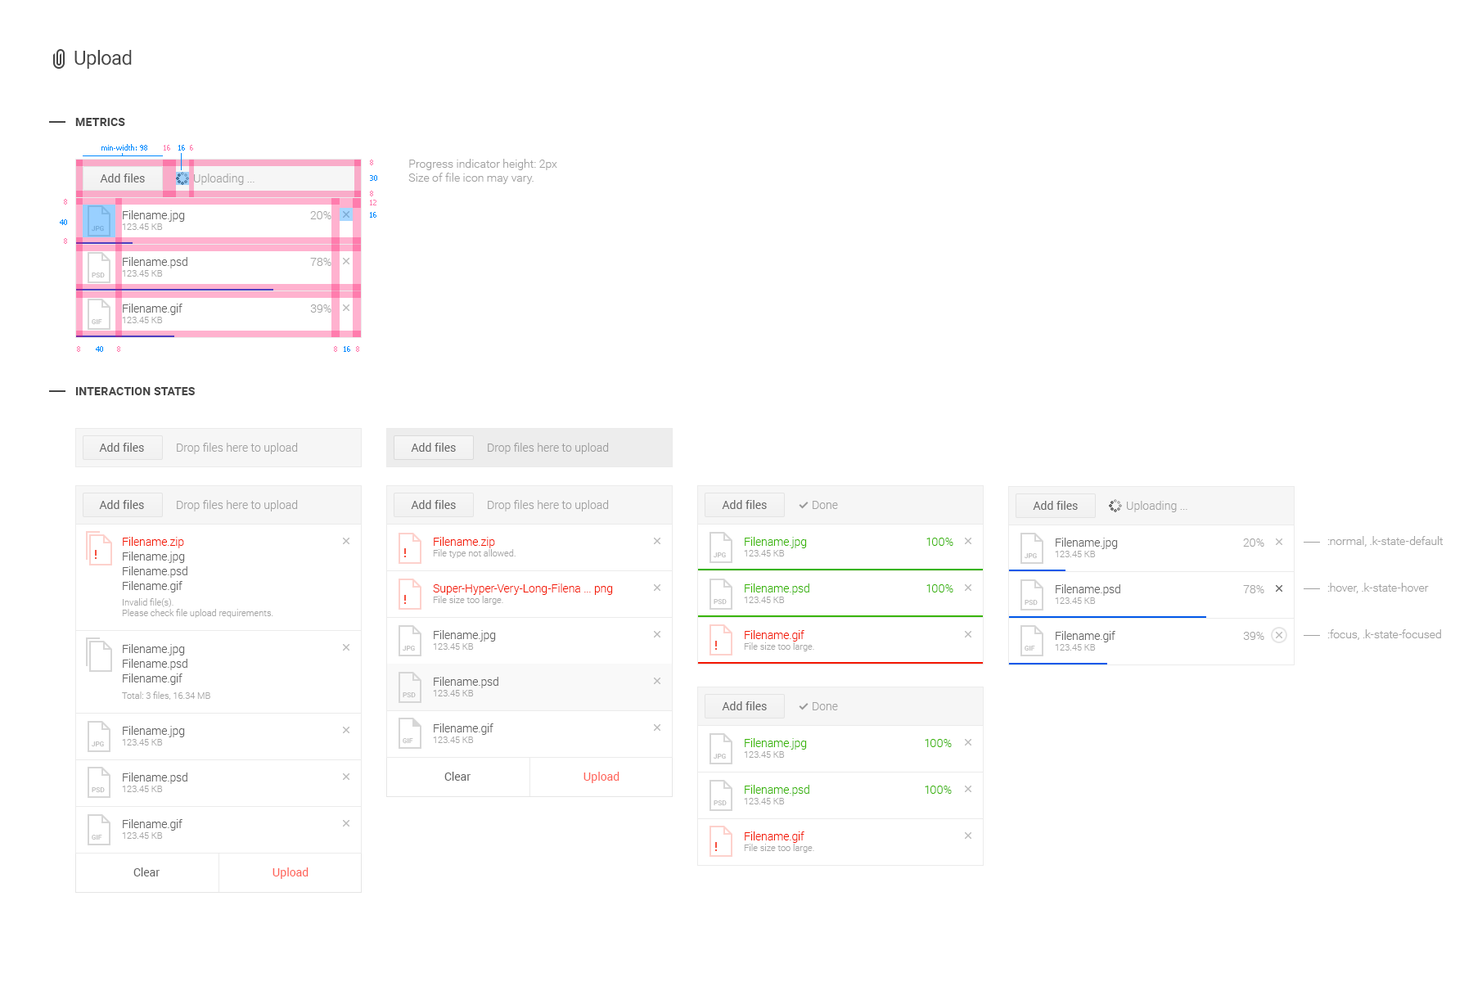
<style>
.page{position:relative;width:1473px;height:982px;background:#ffffff}
.page>*{position:absolute;margin:0}
.t1{font:19.6px "Roboto-Regular";letter-spacing:-0.025em;color:#454545}
.t2{font:11.5px "Roboto-Bold";letter-spacing:0.01em;color:#454545;text-transform:uppercase}
.t3{font:7.4px "Tahoma";color:#008aff}
.t4{font:7.4px "Tahoma";color:#ff7cae}
.t5{font:11.5px "Roboto-Light";color:#a1a1a1}
.t6{font:11.5px "Roboto-Regular";color:#656565}
.t7{font:11.5px/46.6px "Roboto-Light";color:#656565}
.t8{font:11.5px/46.6px "Roboto-Light";color:#a5a5a5}
.t9{font:6.5px "Roboto-Regular";text-transform:uppercase}
.t10{font:6.5px "Roboto-Regular";color:#bababa;text-transform:uppercase}
.t11{font:11.5px "Roboto-Light";color:#9d9d9d}
.t12{font:11.5px/14.7px "Roboto-Light";color:#656565}
.t13{font:11.5px/14.7px "Roboto-Light";color:#f31700}
.t14{font:11.5px/46.6px "Roboto-Light";color:#f31700}
.t15{font:11.5px/46.6px "Roboto-Light";color:#37b400}
.t16{font:11.5px/46.6px "Roboto-Light";color:#a1a1a1}
.t17{font:9px/46.6px "Roboto-Light";color:#a5a5a5}
.t18{font:9px "Roboto-Light";color:#a5a5a5}
.t19{font:11.5px "Roboto-Regular";color:#ff6358}
</style>
<div class="page">
<p class="t1" style="left:74px;top:50px;width:58px;height:19px">Upload</p>
<p class="t2" style="left:75px;top:118px;width:50px;height:8px">Metrics</p>
<p class="t3" style="left:101px;top:144px;width:46px;height:7px">min-width: 98</p>
<p class="t4" style="left:164px;top:145px;width:6px;height:6px">16</p>
<p class="t3" style="left:178px;top:145px;width:7px;height:6px">16</p>
<p class="t4" style="left:190px;top:145px;width:3px;height:6px">6</p>
<p class="t4" style="left:370px;top:160px;width:3px;height:5px">8</p>
<p class="t5" style="left:408px;top:159px;width:149px;height:25px">Progress indicator height: 2px<br>Size of file icon may vary.</p>
<p class="t6" style="left:100px;top:173px;width:45px;height:9px">Add files</p>
<p class="t5" style="left:194px;top:173px;width:60px;height:12px">Uploading ...</p>
<p class="t3" style="left:370px;top:175px;width:7px;height:6px">30</p>
<p class="t4" style="left:370px;top:191px;width:3px;height:5px">8</p>
<p class="t4" style="left:64px;top:199px;width:3px;height:6px">8</p>
<p class="t4" style="left:370px;top:200px;width:6px;height:5px">12</p>
<p class="t3" style="left:60px;top:219px;width:7px;height:6px">40</p>
<p class="t7" style="left:123px;top:210px;width:64px;height:105px">Filename.jpg<br>Filename.psd<br>Filename.gif</p>
<p class="t8" style="left:310px;top:211px;width:21px;height:102px;text-align:right">20%<br>78%<br>39%</p>
<p class="t3" style="left:370px;top:212px;width:6px;height:6px">16</p>
<p class="t9" style="left:92px;top:226px;width:12px;height:6px">JPG</p>
<p class="t4" style="left:64px;top:238px;width:3px;height:6px">8</p>
<p class="t10" style="left:92px;top:272px;width:13px;height:6px">PSD</p>
<p class="t10" style="left:92px;top:319px;width:10px;height:6px">GIF</p>
<p class="t4" style="left:77px;top:346px;width:3px;height:6px">8</p>
<p class="t3" style="left:96px;top:346px;width:7px;height:6px">40</p>
<p class="t4" style="left:117px;top:346px;width:3px;height:6px">8</p>
<p class="t4" style="left:334px;top:346px;width:3px;height:6px">8</p>
<p class="t3" style="left:344px;top:346px;width:6px;height:6px">16</p>
<p class="t4" style="left:356px;top:346px;width:3px;height:6px">8</p>
<p class="t2" style="left:75px;top:387px;width:120px;height:8px">Interaction states</p>
<p class="t6" style="left:99px;top:443px;width:45px;height:9px">Add files</p>
<p class="t5" style="left:177px;top:443px;width:121px;height:11px">Drop files here to upload</p>
<p class="t6" style="left:411px;top:443px;width:45px;height:9px">Add files</p>
<p class="t11" style="left:488px;top:443px;width:121px;height:11px">Drop files here to upload</p>
<p class="t6" style="left:99px;top:500px;width:45px;height:9px">Add files</p>
<p class="t5" style="left:177px;top:500px;width:121px;height:11px">Drop files here to upload</p>
<p class="t6" style="left:411px;top:500px;width:45px;height:9px">Add files</p>
<p class="t5" style="left:488px;top:500px;width:121px;height:11px">Drop files here to upload</p>
<p class="t6" style="left:722px;top:500px;width:45px;height:9px">Add files</p>
<p class="t5" style="left:812px;top:501px;width:26px;height:8px">Done</p>
<p class="t6" style="left:1033px;top:501px;width:45px;height:9px">Add files</p>
<p class="t5" style="left:1127px;top:501px;width:60px;height:11px">Uploading ...</p>
<p class="t12" style="left:123px;top:537px;width:64px;height:55px"><span class="t13">Filename.zip<br></span>Filename.jpg<br>Filename.psd<br>Filename.gif</p>
<p class="t14" style="left:433px;top:537px;width:180px;height:198px">Filename.zip<br>Super-Hyper-Very-Long-Filena ... png<br><span class="t7">Filename.jpg<br>Filename.psd<br>Filename.gif</span></p>
<p class="t15" style="left:745px;top:537px;width:64px;height:104px">Filename.jpg<br>Filename.psd<br><span class="t14">Filename.gif</span></p>
<p class="t15" style="left:926px;top:538px;width:27px;height:54px;text-align:right">100%<br>100%</p>
<p class="t7" style="left:1055px;top:538px;width:65px;height:104px">Filename.jpg<br>Filename.psd<br>Filename.gif</p>
<p class="t8" style="left:1243px;top:538px;width:21px;height:102px;text-align:right">20%<br>78%<br>39%</p>
<p class="t16" style="left:1327px;top:536px;width:116px;height:104px">:normal, .k-state-default<br>:hover, .k-state-hover<br>:focus, .k-state-focused</p>
<p class="t17" style="left:433px;top:549px;width:82px;height:194px">File type not allowed.<br>File size too large.<br>123.45 KB<br>123.45 KB<br>123.45 KB</p>
<p class="t10" style="left:713px;top:552px;width:13px;height:6px">JPG</p>
<p class="t17" style="left:744px;top:550px;width:70px;height:101px">123.45 KB<br>123.45 KB<br>File size too large.</p>
<p class="t10" style="left:1024px;top:553px;width:13px;height:6px">JPG</p>
<p class="t17" style="left:1055px;top:551px;width:41px;height:99px">123.45 KB<br>123.45 KB<br>123.45 KB</p>
<p class="t18" style="left:122px;top:598px;width:151px;height:20px">Invalid file(s).<br>Please check file upload requirements.</p>
<p class="t10" style="left:713px;top:599px;width:14px;height:6px">PSD</p>
<p class="t10" style="left:1024px;top:600px;width:13px;height:5px">PSD</p>
<p class="t12" style="left:123px;top:644px;width:64px;height:41px">Filename.jpg<br>Filename.psd<br>Filename.gif</p>
<p class="t10" style="left:403px;top:646px;width:12px;height:5px">JPG</p>
<p class="t10" style="left:1024px;top:646px;width:11px;height:5px">GIF</p>
<p class="t18" style="left:122px;top:691px;width:88px;height:9px">Total: 3 files, 16.34 MB</p>
<p class="t10" style="left:403px;top:692px;width:13px;height:6px">PSD</p>
<p class="t6" style="left:722px;top:701px;width:45px;height:9px">Add files</p>
<p class="t5" style="left:812px;top:702px;width:26px;height:8px">Done</p>
<p class="t7" style="left:123px;top:726px;width:64px;height:104px">Filename.jpg<br>Filename.psd<br>Filename.gif</p>
<p class="t10" style="left:92px;top:741px;width:12px;height:6px">JPG</p>
<p class="t17" style="left:122px;top:739px;width:41px;height:100px">123.45 KB<br>123.45 KB<br>123.45 KB</p>
<p class="t10" style="left:403px;top:738px;width:10px;height:6px">GIF</p>
<p class="t15" style="left:745px;top:738px;width:64px;height:105px">Filename.jpg<br>Filename.psd<br><span class="t14">Filename.gif</span></p>
<p class="t15" style="left:925px;top:739px;width:27px;height:55px;text-align:right">100%<br>100%</p>
<p class="t10" style="left:713px;top:754px;width:13px;height:5px">JPG</p>
<p class="t17" style="left:744px;top:751px;width:70px;height:102px">123.45 KB<br>123.45 KB<br>File size too large.</p>
<p class="t6" style="left:444px;top:772px;width:26px;height:9px">Clear</p>
<p class="t19" style="left:583px;top:772px;width:36px;height:11px">Upload</p>
<p class="t10" style="left:92px;top:787px;width:13px;height:6px">PSD</p>
<p class="t10" style="left:713px;top:800px;width:14px;height:6px">PSD</p>
<p class="t10" style="left:92px;top:835px;width:10px;height:5px">GIF</p>
<p class="t6" style="left:133px;top:867px;width:27px;height:9px">Clear</p>
<p class="t19" style="left:272px;top:867px;width:36px;height:12px">Upload</p>
</div>
